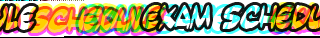
<style>
.page{position:relative;width:320px;height:38px}
.page>*{position:absolute;margin:0}
.t1{font:24px "Yesterdaysmeal"}
</style>
<div class="page">
<p class="t1" style="left:78px;top:7px;width:214px;height:24px">Exam Schedule</p>
</div>
